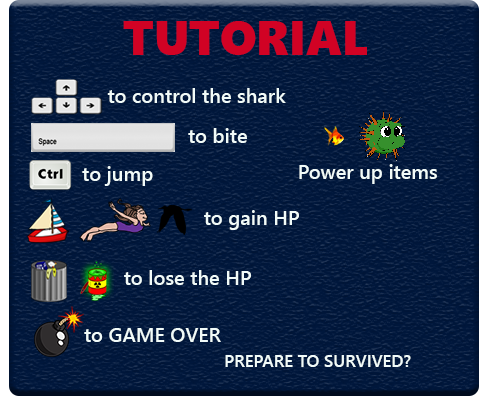
<style>
.page{position:relative;width:488px;height:396px}
.page>*{position:absolute;margin:0}
.t1{font:48px "SegoeUIBlack";color:#d10224}
.t2{font:20px "SegoeUI-Semibold";color:#f1fbf9}
.t3{font:24px "SegoeUI-Semibold";color:#f1fbf9}
.t4{font:17px "SegoeUI-Semibold";color:#f1fbf9}
</style>
<div class="page">
<p class="t1" style="left:123px;top:21px;width:244px;height:34px">TUTORIAL</p>
<p class="t2" style="left:107px;top:88px;width:179px;height:15px"><span class="t3"> </span>                 to control the shark</p>
<p class="t2" style="left:188px;top:128px;width:59px;height:15px">to bite</p>
<p class="t2" style="left:82px;top:166px;width:71px;height:20px">to jump</p>
<p class="t2" style="left:299px;top:164px;width:138px;height:20px">Power up items</p>
<p class="t2" style="left:204px;top:210px;width:95px;height:20px">to gain HP</p>
<p class="t2" style="left:124px;top:270px;width:127px;height:15px">to lose the HP</p>
<p class="t2" style="left:84px;top:328px;width:137px;height:14px">to GAME OVER</p>
<p class="t4" style="left:225px;top:355px;width:186px;height:12px">PREPARE TO SURVIVED?</p>
</div>
